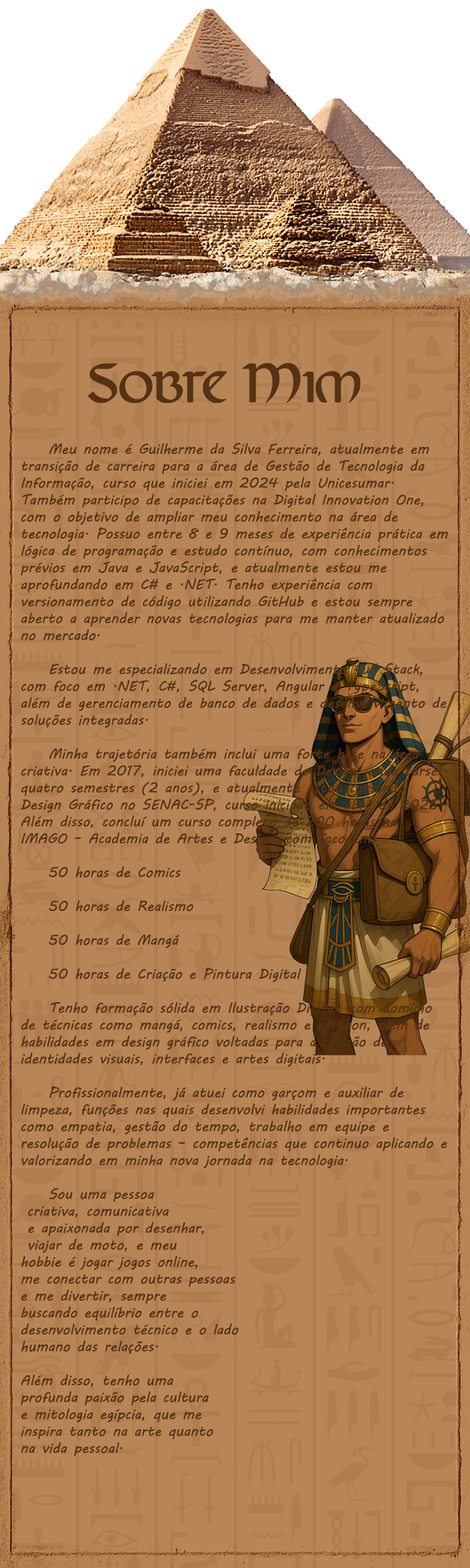
<style>
.page{position:relative;width:470px;height:1568px;background:#b88656}
.page>*{position:absolute;margin:0}
.t1{font:14.1px "MVBoli";color:#543215}
</style>
<div class="page">
<p class="t1" style="left:20px;top:442px;width:428px;height:1015px">Meu nome é Guilherme da Silva Ferreira, atualmente em transição de carreira para a área de Gestão de Tecnologia da Informação, curso que iniciei em 2024 pela Unicesumar. Também participo de capacitações na Digital Innovation One, com o objetivo de ampliar meu conhecimento na área de tecnologia. Possuo entre 8 e 9 meses de experiência prática em lógica de programação e estudo contínuo, com conhecimentos prévios em Java e JavaScript, e atualmente estou me aprofundando em C# e .NET. Tenho experiência com versionamento de código utilizando GitHub e estou sempre aberto a aprender novas tecnologias para me manter atualizado no mercado.<br><br> Estou me especializando em Desenvolvimento Full Stack, com foco em .NET, C#, SQL Server, Angular e TypeScript, além de gerenciamento de banco de dados e desenvolvimento de soluções integradas.<br><br> Minha trajetória também inclui uma forte base na área criativa. Em 2017, iniciei uma faculdade de Design, onde cursei quatro semestres (2 anos), e atualmente estou cursando Design Gráfico no SENAC-SP, curso iniciado em abril de 2025. Além disso, concluí um curso completo de 200 horas na IMAGO – Academia de Artes e Design, com foco em:<br><br> 50 horas de Comics<br><br> 50 horas de Realismo<br><br> 50 horas de Mangá<br><br> 50 horas de Criação e Pintura Digital<br><br> Tenho formação sólida em Ilustração Digital, com domínio de técnicas como mangá, comics, realismo e cartoon, além de habilidades em design gráfico voltadas para a criação de identidades visuais, interfaces e artes digitais.<br><br> Profissionalmente, já atuei como garçom e auxiliar de limpeza, funções nas quais desenvolvi habilidades importantes como empatia, gestão do tempo, trabalho em equipe e resolução de problemas – competências que continuo aplicando e valorizando em minha nova jornada na tecnologia.<br><br> Sou uma pessoa<br> criativa, comunicativa<br> e apaixonada por desenhar,<br> viajar de moto, e meu <br>hobbie é jogar jogos online, <br>me conectar com outras pessoas <br>e me divertir, sempre <br>buscando equilíbrio entre o <br>desenvolvimento técnico e o lado <br>humano das relações.<br><br>Além disso, tenho uma <br>profunda paixão pela cultura <br>e mitologia egípcia, que me <br>inspira tanto na arte quanto<br>na vida pessoal.</p>
</div>
